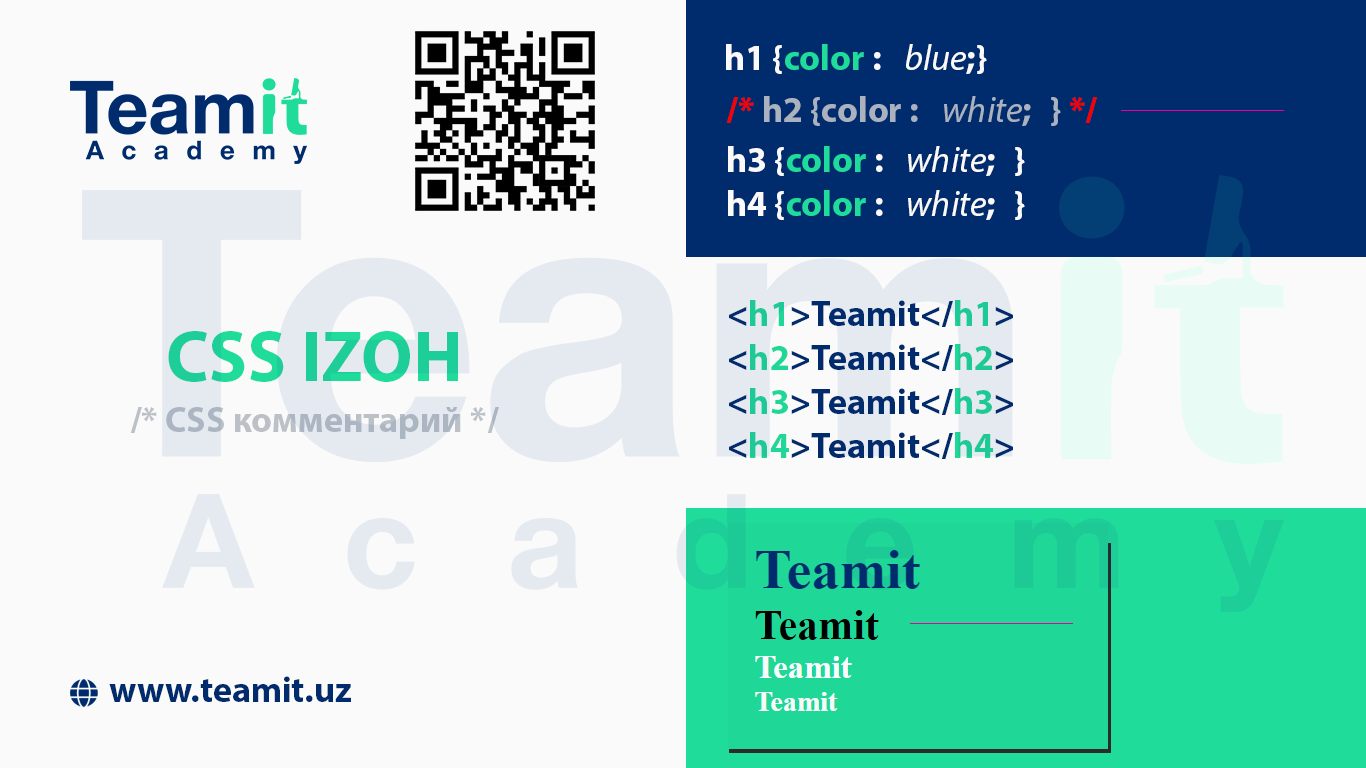
<style>
.page{position:relative;width:1366px;height:768px;background:#fafafa}
.page>*{position:absolute;margin:0}
.t1{font:36px "MyriadPro-Bold";color:#21e09d}
.t2{font:36px "MyriadPro-Bold";color:#ffffff}
.t3{font:36px "MyriadPro-It";color:#ffffff}
.t4{font:36px "MyriadPro-Bold";color:#acb5c2}
.t5{font:36px "MyriadPro-Bold";color:#ff0000}
.t6{font:36px "MyriadPro-It";color:#acb5c2}
.t7{font:36px "MyriadPro-Bold";color:#002c6e}
.t8{font:36px "MyriadPro-Bold";color:#20dc9a}
.t9{font:72px "MyriadPro-Bold";color:#21e09d}
.t10{font:36px "MyriadPro-Bold";color:#bfc4cb}
.t11{font:36px "MyriadPro-Bold";color:#002d70}
</style>
<div class="page">
<p class="t1" style="left:726px;top:44px;width:261px;height:30px"><span class="t2">h1 {</span>color <span class="t2">: </span><span class="t3">blue</span><span class="t2">; }</span></p>
<p class="t4" style="left:726px;top:96px;width:371px;height:30px"><span class="t5">/* </span>h2 {color : <span class="t6">white</span>; } <span class="t5">*/</span></p>
<p class="t1" style="left:728px;top:146px;width:297px;height:30px"><span class="t2">h3 {</span>color <span class="t2">: </span><span class="t3">white</span><span class="t2">; }</span></p>
<p class="t1" style="left:728px;top:190px;width:297px;height:30px"><span class="t2">h4 {</span>color <span class="t2">: </span><span class="t3">white</span><span class="t2">; }</span></p>
<p class="t7" style="left:729px;top:300px;width:284px;height:27px">&lt;<span class="t8">h1</span>&gt;Teamit&lt;/<span class="t8">h1</span>&gt;</p>
<p class="t9" style="left:168px;top:331px;width:290px;height:51px">CSS IZOH</p>
<p class="t7" style="left:729px;top:344px;width:284px;height:27px">&lt;<span class="t8">h2</span>&gt;Teamit&lt;/<span class="t8">h2</span>&gt;</p>
<p class="t7" style="left:729px;top:388px;width:284px;height:27px">&lt;<span class="t8">h3</span>&gt;Teamit&lt;/<span class="t8">h3</span>&gt;</p>
<p class="t10" style="left:130px;top:407px;width:369px;height:32px">/* CSS комментарий */</p>
<p class="t7" style="left:729px;top:432px;width:284px;height:27px">&lt;<span class="t8">h4</span>&gt;Teamit&lt;/<span class="t8">h4</span>&gt;</p>
<p class="t11" style="left:109px;top:676px;width:242px;height:26px">www.teamit.uz</p>
</div>
